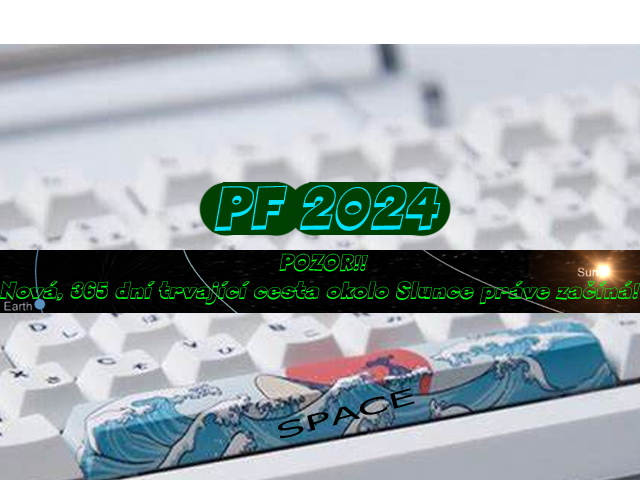
<style>
.page{position:relative;width:640px;height:480px}
.page>*{position:absolute;margin:0}
.t1{font:23px "SneakerheadBTNShadowOblique";color:#00ff18}
.t2{font:21.6px "MSReferenceSansSerif";color:#000000;scale:2.03 1}
</style>
<div class="page">
<p class="t1" style="left:0px;top:253px;width:641px;height:52px;text-align:center">POZOR!!<br>Nová, 365 dní trvající cesta okolo Slunce práve začíná!</p>
<p class="t2" style="left:278px;top:388px;width:137px;height:51px;rotate:-15deg">SPACE</p>
</div>
